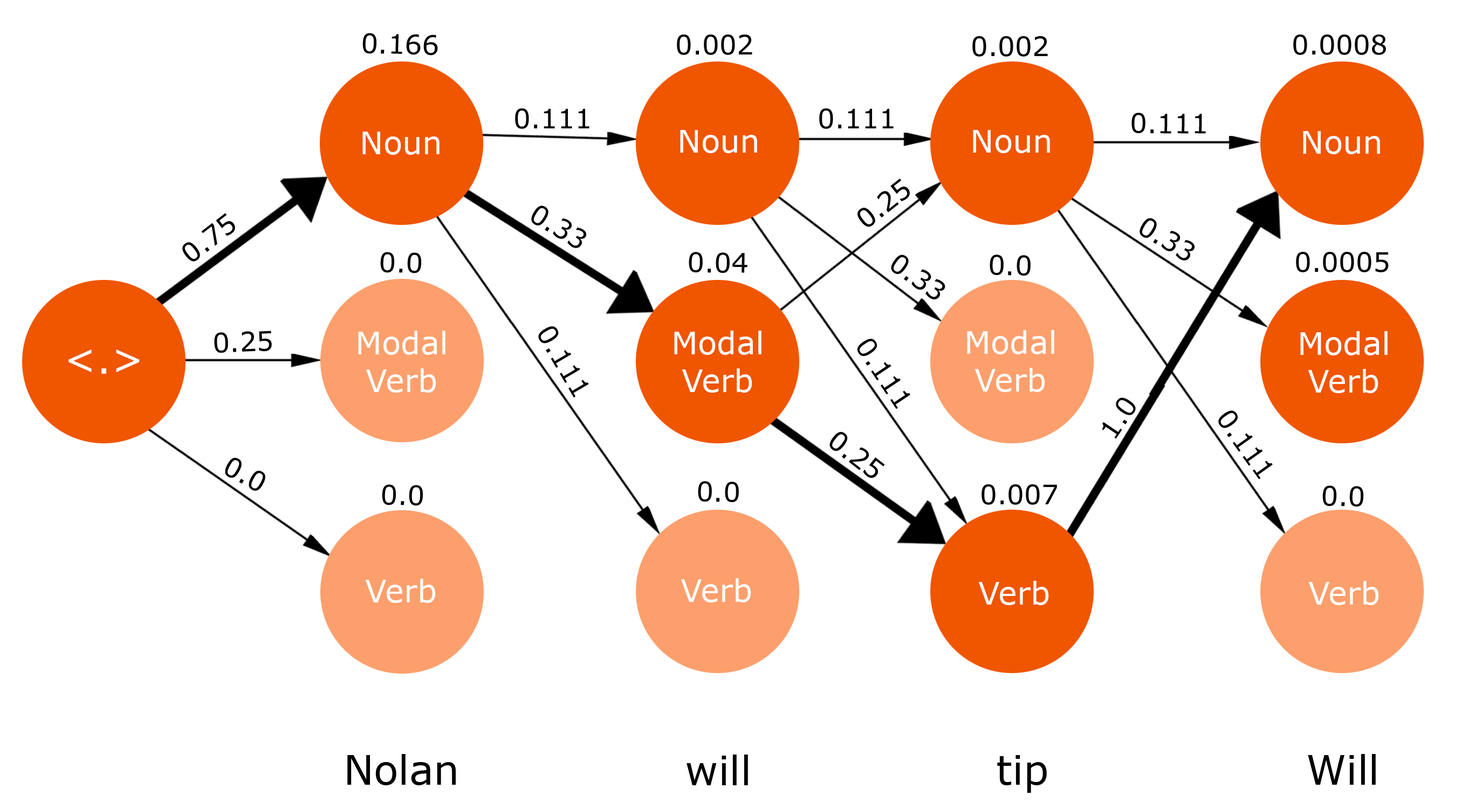
<style>
.page{position:relative;width:1475px;height:809px;background:#ffffff}
.page>*{position:absolute;margin:0}
.t1{font:27px "Verdana";color:#000000}
.t2{font:31.4px "Verdana";color:#ffffff}
.t3{font:40.4px "Verdana";color:#ffffff}
.t4{font:40.4px "Verdana";color:#000000}
</style>
<div class="page">
<p class="t1" style="left:362px;top:33px;width:76px;height:23px;rotate:2deg">0.166</p>
<p class="t1" style="left:677px;top:35px;width:75px;height:20px">0.002</p>
<p class="t1" style="left:972px;top:36px;width:76px;height:21px">0.002</p>
<p class="t1" style="left:1293px;top:35px;width:93px;height:20px">0.0008</p>
<p class="t1" style="left:515px;top:108px;width:74px;height:21px">0.111</p>
<p class="t1" style="left:819px;top:108px;width:74px;height:21px">0.111</p>
<p class="t1" style="left:1131px;top:113px;width:74px;height:21px;rotate:1deg">0.111</p>
<p class="t2" style="left:362px;top:132px;width:77px;height:23px">Noun</p>
<p class="t2" style="left:680px;top:130px;width:77px;height:23px">Noun</p>
<p class="t2" style="left:973px;top:130px;width:77px;height:23px">Noun</p>
<p class="t2" style="left:1303px;top:131px;width:77px;height:23px">Noun</p>
<p class="t1" style="left:857px;top:178px;width:53px;height:49px;rotate:-38deg">0.25</p>
<p class="t1" style="left:531px;top:205px;width:56px;height:43px;rotate:31deg">0.33</p>
<p class="t1" style="left:182px;top:213px;width:53px;height:48px;rotate:-38deg">0.75</p>
<p class="t1" style="left:1139px;top:218px;width:56px;height:42px;rotate:31deg">0.33</p>
<p class="t1" style="left:380px;top:252px;width:41px;height:21px;rotate:2deg">0.0</p>
<p class="t1" style="left:688px;top:252px;width:59px;height:21px;rotate:1deg">0.04</p>
<p class="t1" style="left:891px;top:254px;width:54px;height:45px;rotate:35deg">0.33</p>
<p class="t1" style="left:989px;top:254px;width:41px;height:21px;rotate:1deg">0.0</p>
<p class="t1" style="left:1296px;top:252px;width:92px;height:20px">0.0005</p>
<p class="t1" style="left:538px;top:326px;width:51px;height:71px;rotate:60deg">0.111</p>
<p class="t2" style="left:967px;top:330px;width:87px;height:62px;text-align:center">Modal<br>Verb</p>
<p class="t1" style="left:214px;top:330px;width:58px;height:23px;rotate:-2deg">0.25</p>
<p class="t2" style="left:358px;top:330px;width:87px;height:62px;text-align:center">Modal<br>Verb</p>
<p class="t2" style="left:674px;top:330px;width:87px;height:62px;text-align:center">Modal<br>Verb</p>
<p class="t1" style="left:857px;top:339px;width:53px;height:70px;rotate:56deg">0.111</p>
<p class="t2" style="left:1300px;top:331px;width:87px;height:62px;text-align:center">Modal<br>Verb</p>
<p class="t3" style="left:68px;top:349px;width:72px;height:25px">&lt;.&gt;</p>
<p class="t1" style="left:1101px;top:397px;width:34px;height:42px;rotate:-56deg">1.0</p>
<p class="t1" style="left:1218px;top:410px;width:54px;height:69px;rotate:55deg">0.111</p>
<p class="t1" style="left:829px;top:431px;width:56px;height:47px;rotate:38deg">0.25</p>
<p class="t1" style="left:225px;top:457px;width:40px;height:34px;rotate:28deg">0.0</p>
<p class="t1" style="left:382px;top:484px;width:41px;height:22px;rotate:2deg">0.0</p>
<p class="t1" style="left:698px;top:481px;width:41px;height:21px;rotate:1deg">0.0</p>
<p class="t1" style="left:981px;top:484px;width:76px;height:21px">0.007</p>
<p class="t1" style="left:1322px;top:485px;width:41px;height:22px;rotate:2deg">0.0</p>
<p class="t2" style="left:365px;top:578px;width:71px;height:25px">Verb</p>
<p class="t2" style="left:680px;top:578px;width:71px;height:24px">Verb</p>
<p class="t2" style="left:978px;top:581px;width:71px;height:24px">Verb</p>
<p class="t2" style="left:1308px;top:581px;width:71px;height:24px">Verb</p>
<p class="t4" style="left:347px;top:754px;width:109px;height:31px">Nolan</p>
<p class="t4" style="left:686px;top:754px;width:62px;height:31px">will</p>
<p class="t4" style="left:997px;top:755px;width:49px;height:38px">tip</p>
<p class="t4" style="left:1307px;top:754px;width:68px;height:30px">Will</p>
</div>
